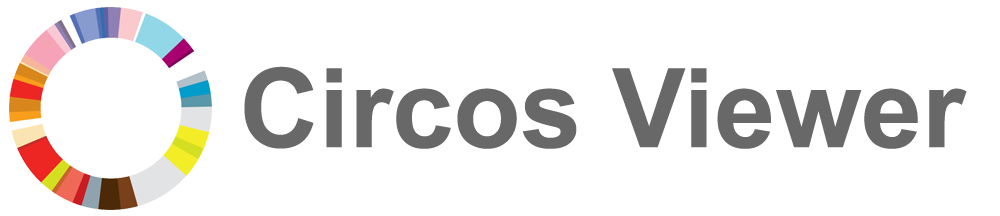
<style>
.page{position:relative;width:1000px;height:216px;background:#ffffff}
.page>*{position:absolute;margin:0}
.t1{font:110px "Arial-BoldMT";color:#686868}
</style>
<div class="page">
<p class="t1" style="left:244px;top:66px;width:723px;height:83px">Circos Viewer</p>
</div>
